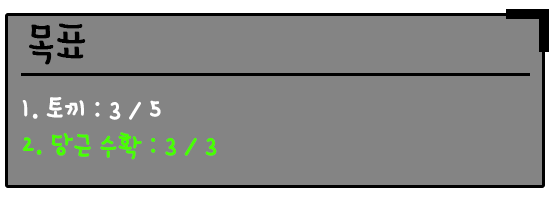
<style>
.page{position:relative;width:550px;height:200px;background:#848484}
.page>*{position:absolute;margin:0}
.t1{font:48px "365uppercat";color:#000000;font-weight:bold}
.t2{font:30px "365uppercat";color:#48ff00;font-weight:bold}
.t3{font:30px "365uppercat";color:#ffffff;font-weight:bold}
</style>
<div class="page">
<p class="t1" style="left:29px;top:23px;width:57px;height:42px">목표</p>
<p class="t2" style="left:22px;top:97px;width:195px;height:63px"><span class="t3">1. 토끼 : 3 / 5<br></span>2. 당근 수확 : 3 / 3</p>
</div>
